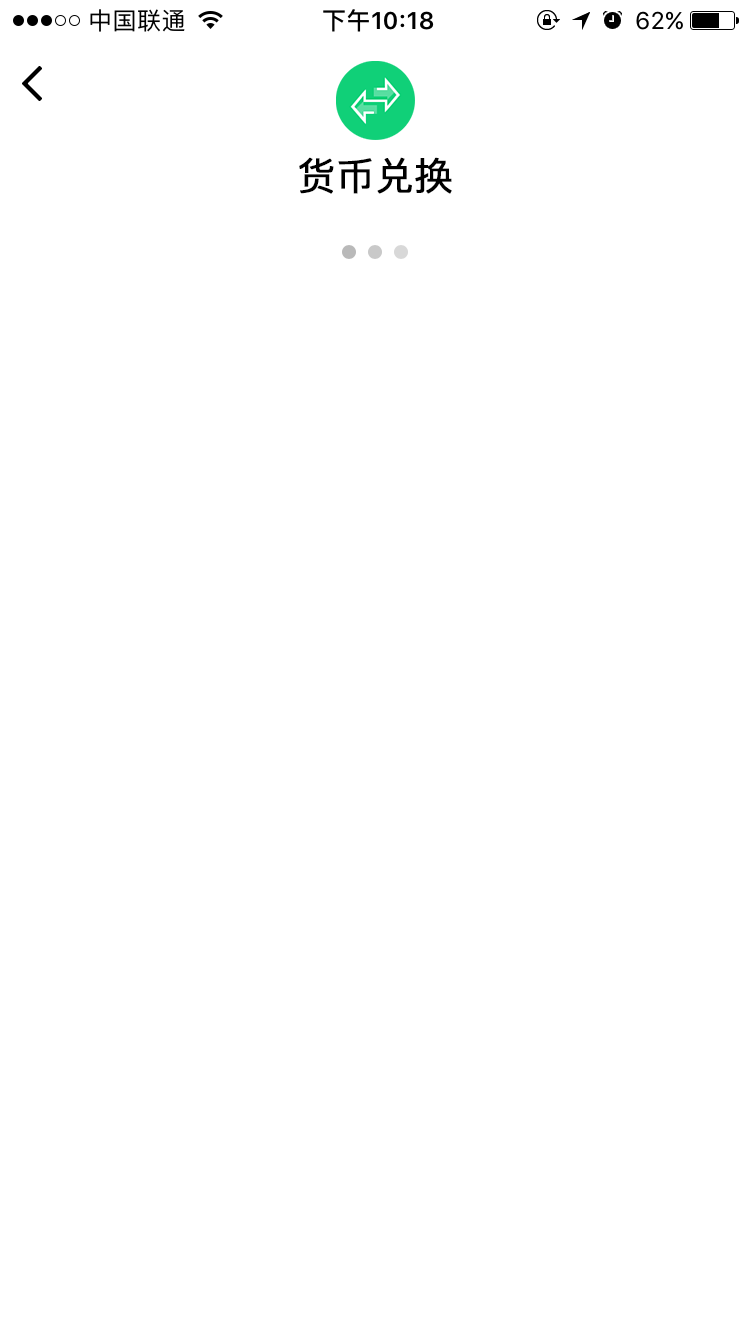
<style>
.page{position:relative;width:750px;height:1334px;background:#ffffff}
.page>*{position:absolute;margin:0}
.t1{font:38px "PingFang-SC-Medium";color:#000000;font-weight:bold}
</style>
<div class="page">
<p class="t1" style="left:299px;top:157px;width:153px;height:37px">货币兑换</p>
</div>
